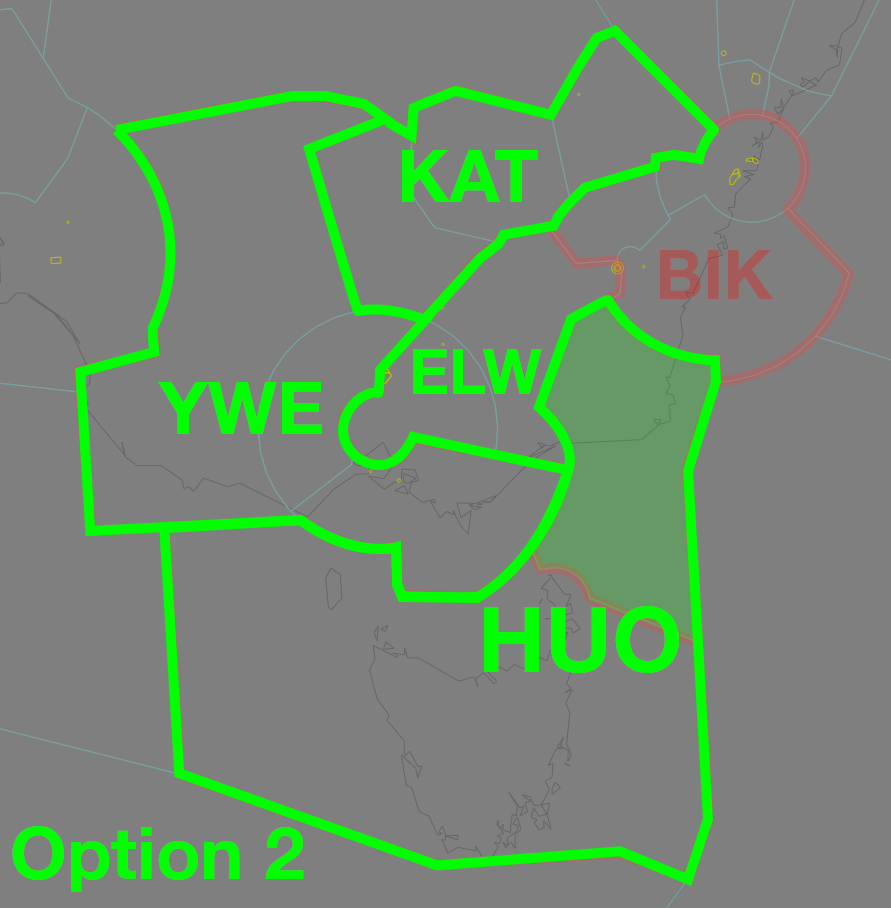
<style>
.page{position:relative;width:891px;height:908px;background:#7f7f7f}
.page>*{position:absolute;margin:0}
.t1{font:72.5px "HelveticaNeueLTStd-Bd";color:#00ff00}
.t2{font:68.7px "HelveticaNeueLTStd-Bd";color:#a65959}
.t3{font:63px "HelveticaNeueLTStd-Bd";color:#00ff00}
.t4{font:90.7px "HelveticaNeueLTStd-Bd";color:#00ff00}
</style>
<div class="page">
<p class="t1" style="left:402px;top:150px;width:136px;height:52px">KAT</p>
<p class="t2" style="left:660px;top:250px;width:113px;height:49px">BIK</p>
<p class="t3" style="left:413px;top:349px;width:129px;height:45px">ELW</p>
<p class="t1" style="left:158px;top:382px;width:164px;height:52px">YWE</p>
<p class="t4" style="left:484px;top:606px;width:195px;height:67px">HUO</p>
<p class="t1" style="left:12px;top:826px;width:292px;height:66px">Option 2</p>
</div>
